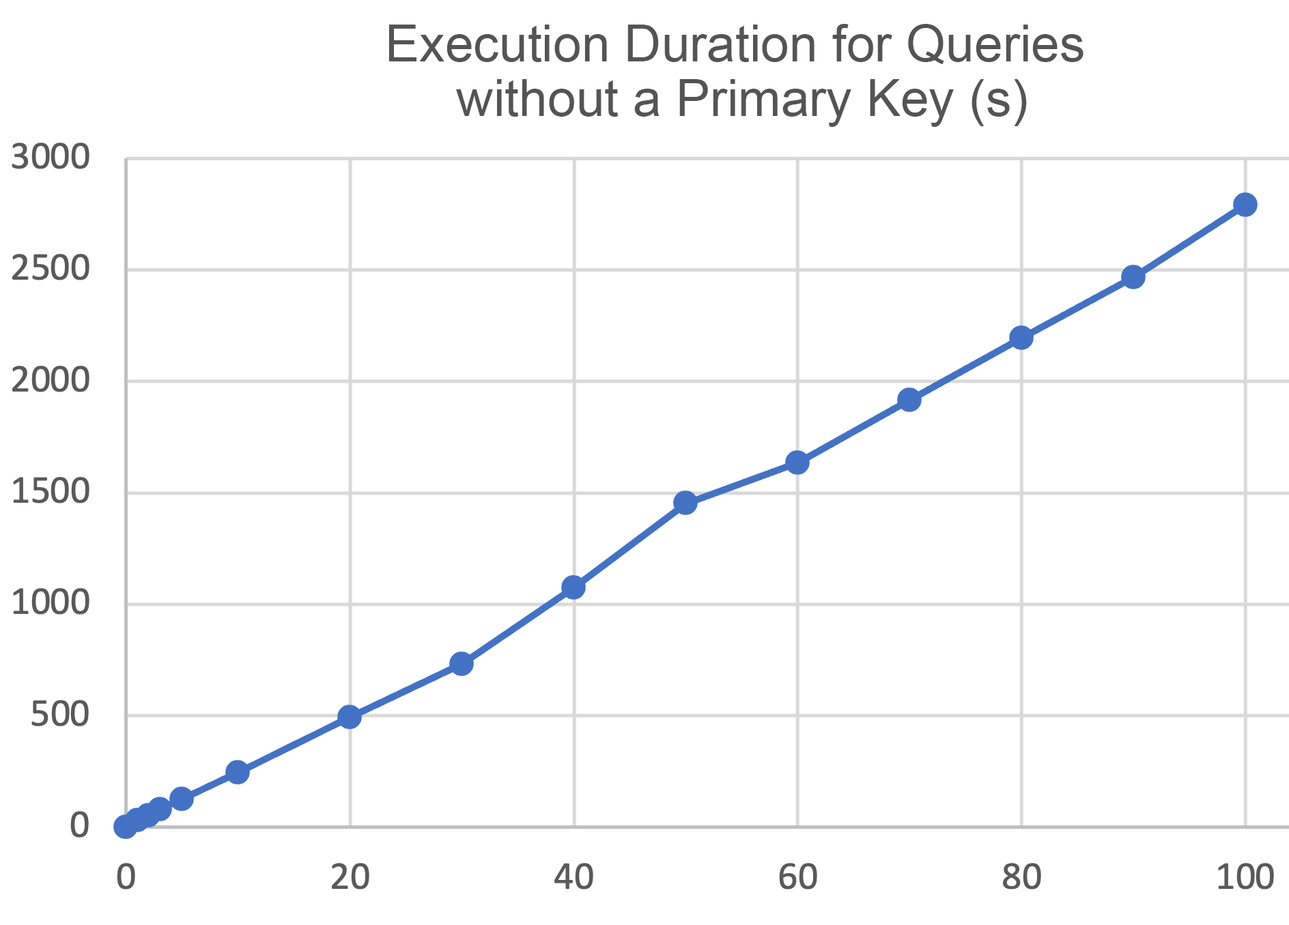
<style>
.page{position:relative;width:1289px;height:925px;background:#ffffff}
.page>*{position:absolute;margin:0}
.t1{font:51.2px/54.6px "ArialMT";color:#545454}
</style>
<div class="page">
<p class="t1" style="left:388px;top:24px;width:695px;height:103px;text-align:center">Execution Duration for Queries <br>without a Primary Key (s)</p>
</div>
